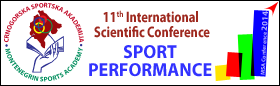
<style>
.page{position:relative;width:280px;height:86px;background:#ffffff}
.page>*{position:absolute;margin:0}
.t1{font:15.1px/14.8px "MyriadPro-Bold";color:#9e291f;scale:0.82 1}
.t2{font:8.3px "MyriadPro-Bold";color:#b2b0ff;text-transform:uppercase;scale:1.04 1}
.t3{font:5.7px "MyriadPro-Bold";color:#b2b0ff;scale:1.04 1}
.t4{font:18.8px/18.5px "MyriadPro-Bold";color:#3232ff;text-transform:uppercase;scale:0.96 1}
</style>
<div class="page">
<p class="t1" style="left:94px;top:10px;width:116px;height:28px;text-align:center">11th International <br>Scientific Conference</p>
<p class="t2" style="left:261px;top:11px;width:7px;height:20px;rotate:-87deg">2014</p>
<p class="t3" style="left:260px;top:32px;width:7px;height:43px;rotate:-87deg">MSA Conference</p>
<p class="t4" style="left:89px;top:45px;width:123px;height:32px;text-align:center">SPORT<br>PERFORMANCE</p>
</div>
